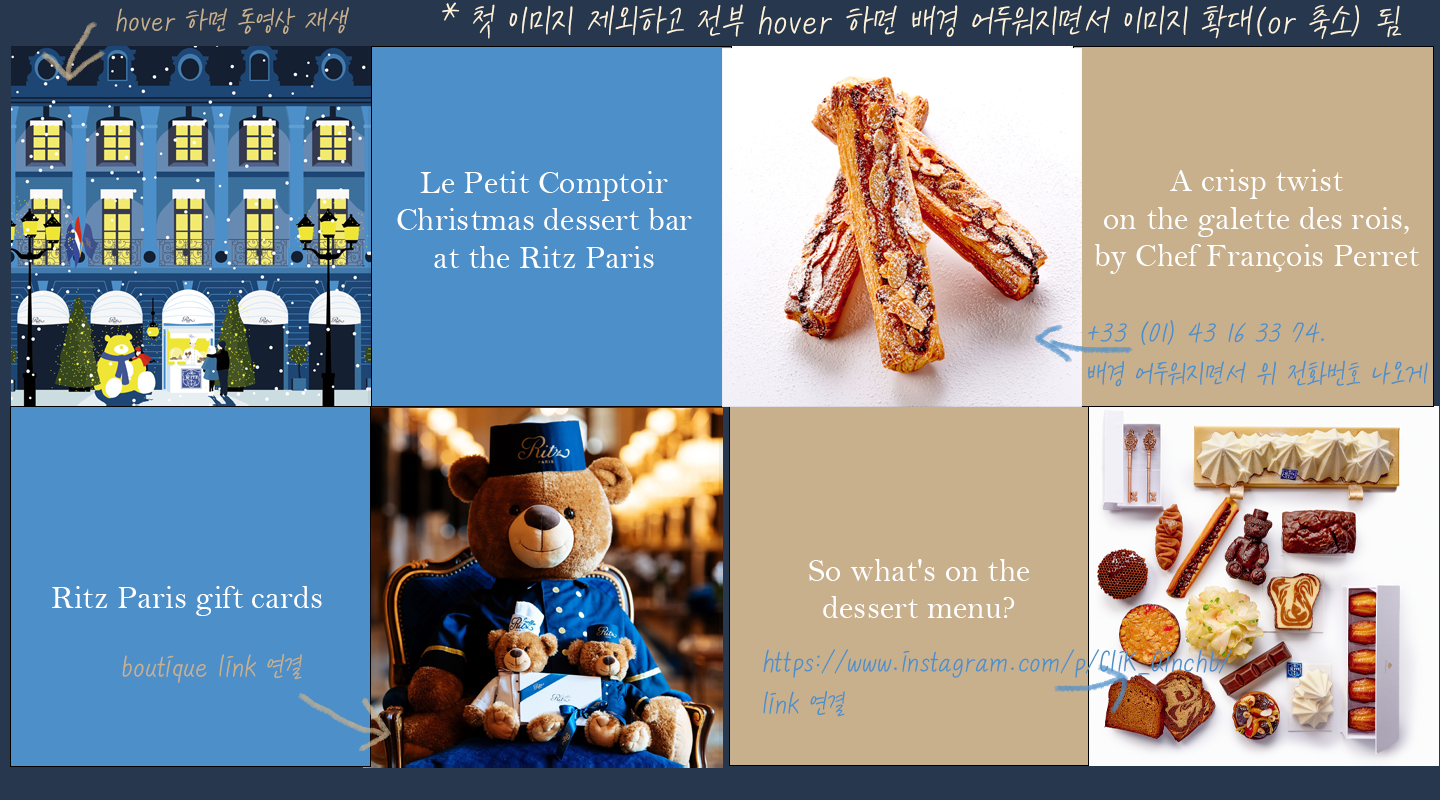
<style>
.page{position:relative;width:1440px;height:800px;background:#4d8fc9}
.page>*{position:absolute;margin:0}
.t1{font:41.7px "KCC-eunyoung-Regular";color:#fff4db}
.t2{font:33.3px "KCC-eunyoung-Regular";color:#c8b08d}
.t3{font:33.3px/37.5px "BellMT";color:#ffffff}
.t4{font:33.3px/41.7px "KCC-eunyoung-Regular";color:#4d8fc9}
.t5{font:33.3px "BellMT";color:#ffffff}
</style>
<div class="page">
<p class="t1" style="left:442px;top:2px;width:960px;height:37px">* 첫 이미지 제외하고 전부 hover 하면 배경 어두워지면서 이미지 확대(or 축소) 됨</p>
<p class="t2" style="left:116px;top:7px;width:233px;height:27px">hover 하면 동영상 재생</p>
<p class="t3" style="left:397px;top:171px;width:295px;height:97px;text-align:center">Le Petit Comptoir<br>Christmas dessert bar<br>at the Ritz Paris</p>
<p class="t3" style="left:1095px;top:169px;width:325px;height:105px;text-align:center">A crisp twist<br>on the galette des rois,<br>by Chef François Perret</p>
<p class="t4" style="left:1088px;top:320px;width:340px;height:67px">+33 (01) 43 16 33 74.<br>배경 어두워지면서 위 전화번호 나오게</p>
<p class="t3" style="left:809px;top:559px;width:221px;height:59px;text-align:center">So what's on the<br>dessert menu?</p>
<p class="t5" style="left:52px;top:586px;width:270px;height:30px">Ritz Paris gift cards</p>
<p class="t2" style="left:122px;top:654px;width:180px;height:29px">boutique link 연결</p>
<p class="t4" style="left:763px;top:649px;width:470px;height:68px">https://www.instagram.com/p/CIiK_Qinchb/<br>link 연결</p>
</div>
